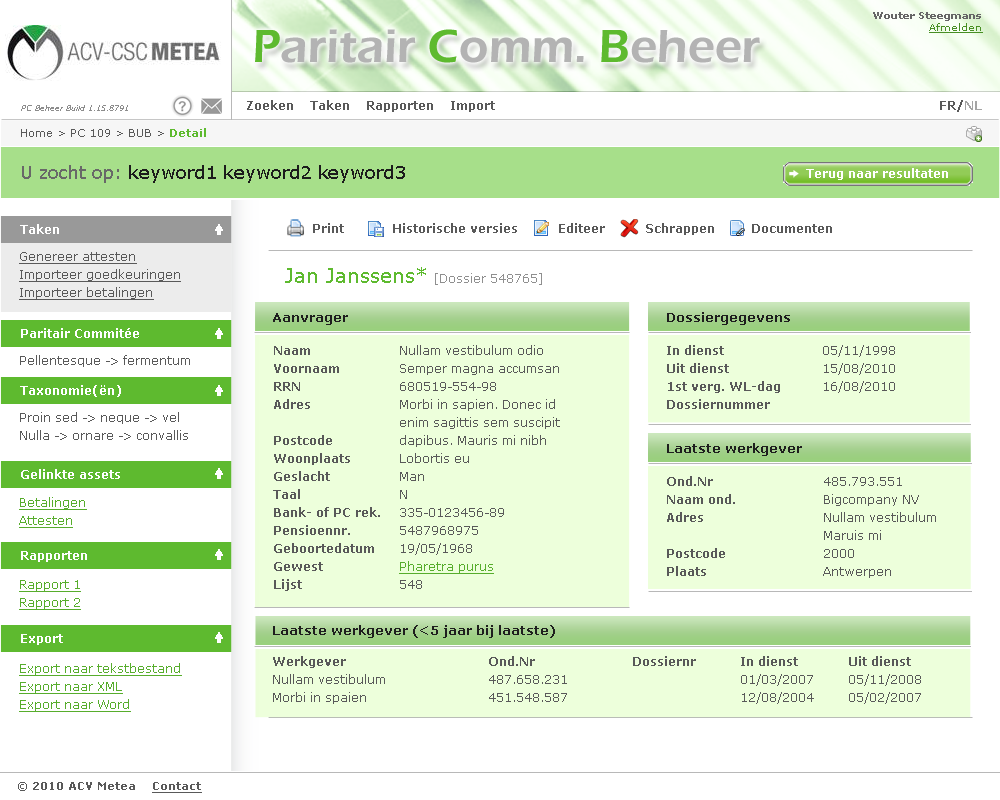
<style>
.page{position:relative;width:1000px;height:800px;background:#ffffff}
.page>*{position:absolute;margin:0}
.t1{font:10px "Verdana-Bold";color:#666666}
.t2{font:10px "Verdana";color:#488f24;text-decoration:underline}
.t3{font:48px "ErasITC-Demi";color:#b3b3b3}
.t4{font:48px "ErasITC-Demi";color:#5eba2f}
.t5{font:12px "Verdana-Bold";color:#595959}
.t6{font:12px "Verdana-Bold";color:#a4a4a4}
.t7{font:8px "Verdana-Italic";color:#8c8c8c}
.t8{font:11px "Verdana";color:#595959}
.t9{font:11px "Verdana-Bold";color:#5eba2f}
.t10{font:18px "Verdana";color:#1c1c1c}
.t11{font:18px "Verdana";color:#686868}
.t12{font:12px "Verdana-Bold";color:#ffffff}
.t13{font:12px/18px "Verdana";color:#595959;text-decoration:underline}
.t14{font:12px "Verdana";color:#8f8f8f}
.t15{font:20px "Verdana";color:#5eba2f}
.t16{font:13px "Verdana-Bold";color:#1e1e1e}
.t17{font:12px/18px "Verdana-Bold";color:#595959}
.t18{font:12px/18px "Verdana";color:#595959}
.t19{font:12px/18px "Verdana";color:#57ad2c;text-decoration:underline}
.t20{font:12px "Verdana";color:#595959}
.t21{font:11px "Verdana-Bold";color:#595959}
.t22{font:11px "Verdana-Bold";color:#595959;text-decoration:underline}
</style>
<div class="page">
<p class="t1" style="left:873px;top:12px;width:110px;height:21px;text-align:right">Wouter Steegmans<br><span class="t2">Afmelden</span></p>
<p class="t3" style="left:255px;top:29px;width:505px;height:34px"><span class="t4">P</span>aritair <span class="t4">C</span>omm. <span class="t4">B</span>eheer</p>
<p class="t5" style="left:247px;top:100px;width:248px;height:12px">Zoeken    Taken    Rapporten    Import</p>
<p class="t5" style="left:940px;top:100px;width:42px;height:12px">FR/<span class="t6">NL</span></p>
<p class="t7" style="left:21px;top:105px;width:107px;height:6px">PC Beheer Build 1.15.8791</p>
<p class="t8" style="left:21px;top:128px;width:185px;height:9px">Home &gt; PC 109 &gt; BUB &gt; <span class="t9">Detail</span></p>
<p class="t10" style="left:22px;top:165px;width:383px;height:18px"><span class="t11">U zocht op: </span>keyword1 keyword2 keyword3</p>
<p class="t12" style="left:806px;top:168px;width:142px;height:12px">Terug naar resultaten</p>
<p class="t12" style="left:20px;top:224px;width:39px;height:10px">Taken</p>
<p class="t5" style="left:313px;top:223px;width:519px;height:12px">Print            Historische versies          Editeer          Schrappen         Documenten</p>
<p class="t13" style="left:19px;top:252px;width:162px;height:48px">Genereer attesten<br>Importeer goedkeuringen<br>Importeer betalingen</p>
<p class="t14" style="left:285px;top:267px;width:257px;height:18px"><span class="t15">Jan Janssens* </span>[Dossier 548765]</p>
<p class="t16" style="left:273px;top:313px;width:75px;height:12px">Aanvrager</p>
<p class="t16" style="left:667px;top:312px;width:123px;height:13px">Dossiergegevens</p>
<p class="t12" style="left:21px;top:328px;width:118px;height:10px">Paritair Commitée</p>
<p class="t17" style="left:273px;top:346px;width:107px;height:245px">Naam<br>Voornaam<br>RRN<br>Adres<br><br>Postcode<br>Woonplaats<br>Geslacht<br>Taal<br>Bank- of PC rek.<br>Pensioennr.<br>Geboortedatum<br>Gewest<br>Lijst</p>
<p class="t18" style="left:399px;top:345px;width:161px;height:244px">Nullam vestibulum odio <br>Semper magna accumsan <br>680519-554-98<br>Morbi in sapien. Donec id <br>enim sagittis sem suscipit <br>dapibus. Mauris mi nibh<br>Lobortis eu<br>Man<br>N<br>335-0123456-89<br>5487968975<br>19/05/1968<br><span class="t19">Pharetra purus<br></span>548</p>
<p class="t17" style="left:667px;top:345px;width:113px;height:64px">In dienst<br>Uit dienst<br>1st verg. WL-dag<br>Dossiernummer</p>
<p class="t18" style="left:823px;top:345px;width:72px;height:48px">05/11/1998<br>15/08/2010<br>16/08/2010</p>
<p class="t20" style="left:20px;top:355px;width:170px;height:12px">Pellentesque -&gt; fermentum</p>
<p class="t12" style="left:20px;top:385px;width:101px;height:12px">Taxonomie(ën)</p>
<p class="t18" style="left:20px;top:412px;width:168px;height:28px">Proin sed -&gt; neque -&gt; vel <br>Nulla -&gt; ornare -&gt; convallis</p>
<p class="t16" style="left:667px;top:443px;width:135px;height:13px">Laatste werkgever</p>
<p class="t12" style="left:21px;top:469px;width:99px;height:10px">Gelinkte assets</p>
<p class="t17" style="left:667px;top:476px;width:68px;height:100px">Ond.Nr<br>Naam ond.<br>Adres<br><br>Postcode<br>Plaats</p>
<p class="t18" style="left:823px;top:477px;width:113px;height:101px">485.793.551<br>Bigcompany NV<br>Nullam vestibulum <br>Maruis mi<br>2000<br>Antwerpen</p>
<p class="t19" style="left:19px;top:497px;width:68px;height:31px">Betalingen<br>Attesten</p>
<p class="t12" style="left:21px;top:551px;width:66px;height:11px">Rapporten</p>
<p class="t19" style="left:19px;top:580px;width:62px;height:30px">Rapport 1<br>Rapport 2</p>
<p class="t16" style="left:273px;top:625px;width:282px;height:13px">Laatste werkgever (&lt;5 jaar bij laatste)</p>
<p class="t12" style="left:21px;top:634px;width:42px;height:11px">Export</p>
<p class="t19" style="left:19px;top:663px;width:163px;height:49px">Export naar tekstbestand<br>Export naar XML<br>Export naar Word</p>
<p class="t18" style="left:273px;top:656px;width:648px;height:48px"><span class="t17">Werkgever    Ond.Nr   Dossiernr  In dienst  Uit dienst<br></span>Nullam vestibulum    487.658.231     01/03/2007 05/11/2008<br>Morbi in spaien    451.548.587     12/08/2004 05/02/2007</p>
<p class="t21" style="left:18px;top:782px;width:184px;height:11px"><span class="t8">©</span> 2010 ACV Metea    <span class="t22">Contact</span></p>
</div>
